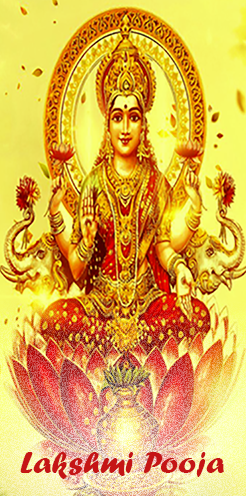
<style>
.page{position:relative;width:246px;height:496px}
.page>*{position:absolute;margin:0}
.t1{font:30.6px "ForteMT";color:#c51515;scale:1.09 1}
</style>
<div class="page">
<p class="t1" style="left:20px;top:452px;width:204px;height:27px">Lakshmi Pooja</p>
</div>
